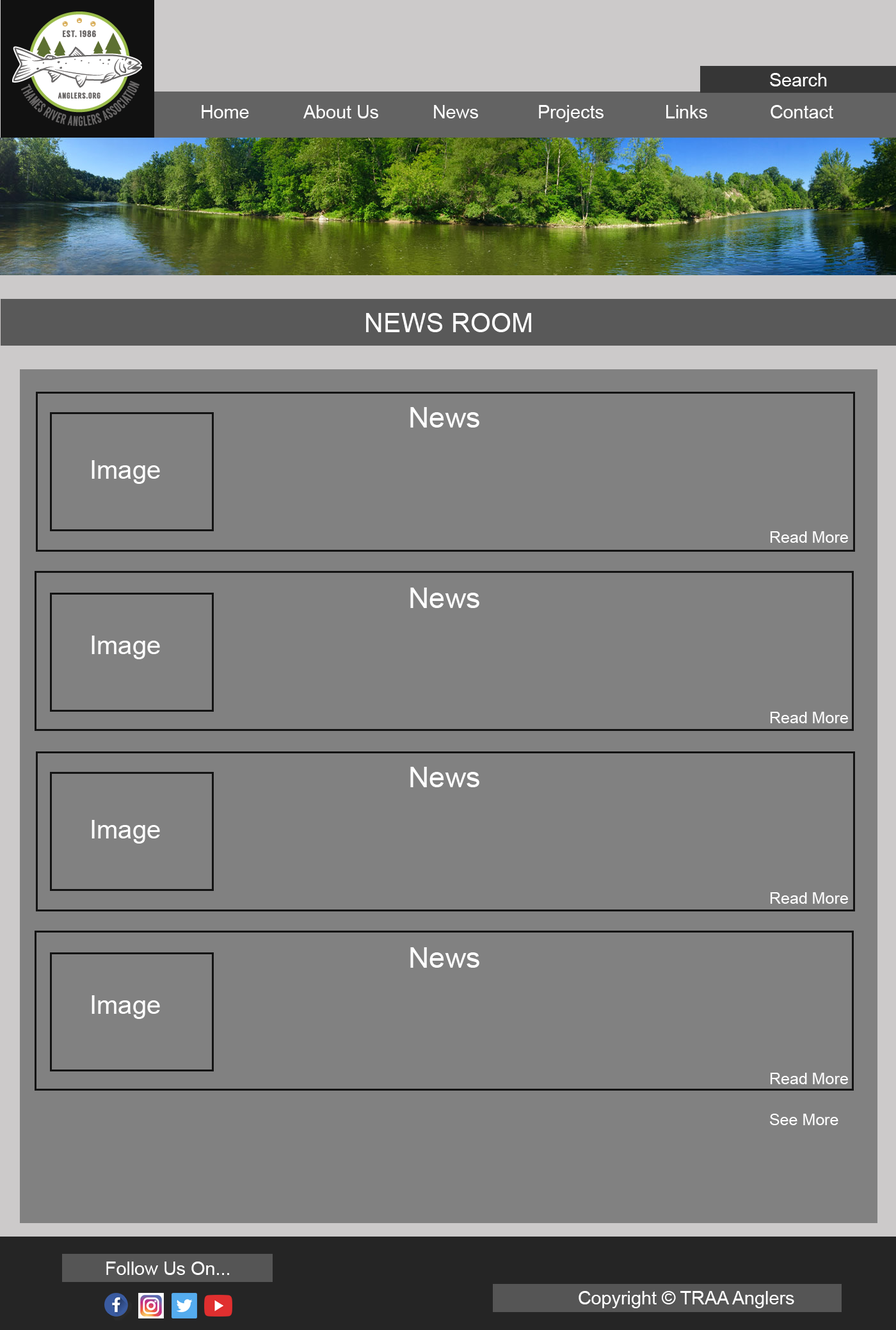
<style>
.page{position:relative;width:896px;height:1330px;background:#818181}
.page>*{position:absolute;margin:0}
.t1{font:18.4px "ArialMT";color:#ffffff}
.t2{font:26.5px "ArialMT";color:#ffffff}
.t3{font:28.8px "ArialMT";color:#ffffff}
.t4{font:25.6px "ArialMT";color:#ffffff}
.t5{font:16px "ArialMT";color:#ffffff}
</style>
<div class="page">
<p class="t1" style="left:770px;top:72px;width:57px;height:14px">Search</p>
<p class="t1" style="left:770px;top:73px;width:57px;height:13px">Search</p>
<p class="t1" style="left:202px;top:105px;width:47px;height:13px">Home</p>
<p class="t1" style="left:303px;top:105px;width:75px;height:13px">About Us</p>
<p class="t1" style="left:434px;top:105px;width:44px;height:13px">News</p>
<p class="t1" style="left:539px;top:105px;width:65px;height:17px">Projects</p>
<p class="t1" style="left:666px;top:105px;width:41px;height:13px">Links</p>
<p class="t1" style="left:771px;top:105px;width:63px;height:13px">Contact</p>
<p class="t2" style="left:366px;top:313px;width:165px;height:19px">NEWS ROOM</p>
<p class="t3" style="left:410px;top:407px;width:70px;height:21px">News</p>
<p class="t4" style="left:92px;top:460px;width:68px;height:24px">Image</p>
<p class="t5" style="left:771px;top:531px;width:77px;height:12px">Read More</p>
<p class="t3" style="left:410px;top:588px;width:70px;height:20px">News</p>
<p class="t4" style="left:92px;top:636px;width:68px;height:23px">Image</p>
<p class="t5" style="left:771px;top:712px;width:77px;height:11px">Read More</p>
<p class="t3" style="left:410px;top:767px;width:70px;height:20px">News</p>
<p class="t4" style="left:92px;top:820px;width:68px;height:24px">Image</p>
<p class="t5" style="left:771px;top:892px;width:77px;height:12px">Read More</p>
<p class="t3" style="left:410px;top:948px;width:70px;height:20px">News</p>
<p class="t4" style="left:92px;top:996px;width:68px;height:23px">Image</p>
<p class="t5" style="left:771px;top:1073px;width:77px;height:12px">Read More</p>
<p class="t5" style="left:770px;top:1114px;width:69px;height:12px">See More</p>
<p class="t1" style="left:106px;top:1261px;width:123px;height:14px">Follow Us On...</p>
<p class="t1" style="left:106px;top:1262px;width:123px;height:13px">Follow Us On...</p>
<p class="t1" style="left:579px;top:1291px;width:216px;height:18px">Copyright © TRAA Anglers</p>
</div>
